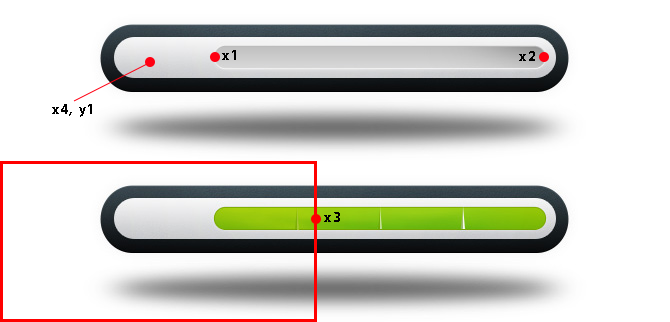
<style>
.page{position:relative;width:670px;height:322px;background:#ffffff}
.page>*{position:absolute;margin:0}
.t1{font:14px "MyriadPro-Bold";letter-spacing:0.11em;color:#000000}
</style>
<div class="page">
<p class="t1" style="left:222px;top:50px;width:14px;height:10px">x1</p>
<p class="t1" style="left:519px;top:51px;width:16px;height:10px">x2</p>
<p class="t1" style="left:52px;top:104px;width:40px;height:13px">x4, y1</p>
<p class="t1" style="left:324px;top:212px;width:16px;height:10px">x3</p>
</div>
